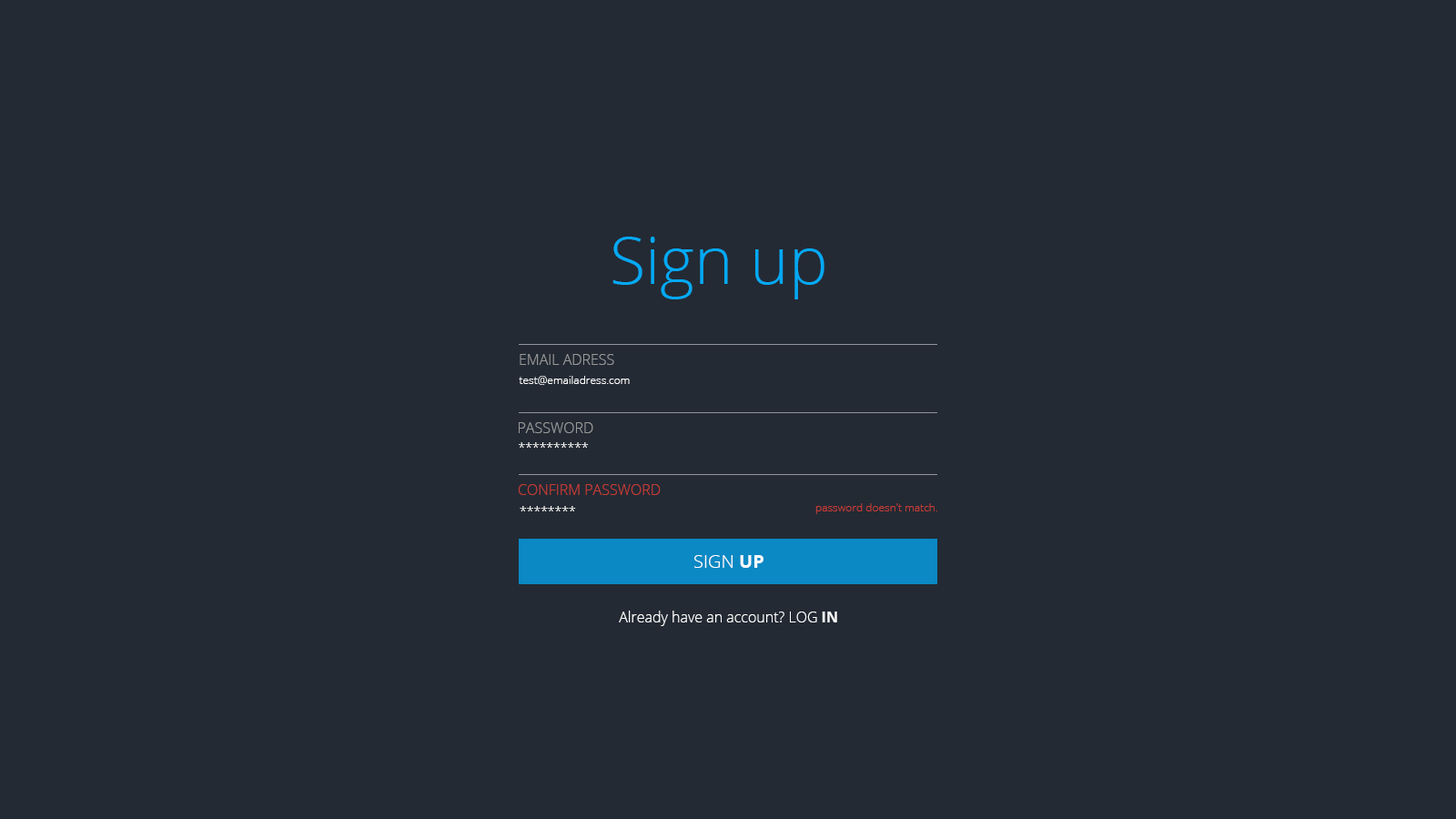
<style>
.page{position:relative;width:1456px;height:819px;background:#232a34}
.page>*{position:absolute;margin:0}
.t1{font:65.5px "OpenSans-Light";color:#03a9f4}
.t2{font:14.6px "OpenSans-Light";color:#999999}
.t3{font:10.9px "OpenSans-Light";color:#ffffff}
.t4{font:12.7px "OpenSans-Light";color:#ffffff}
.t5{font:14.6px "OpenSans-Light";color:#c63c35}
.t6{font:10.9px "OpenSans-Light";color:#c53b35}
.t7{font:18.2px "OpenSans-Light";color:#ffffff}
.t8{font:18.2px "OpenSans-Bold";color:#ffffff}
.t9{font:14.6px "OpenSans-Light";color:#ffffff}
.t10{font:14.6px "OpenSans-Bold";color:#ffffff}
</style>
<div class="page">
<p class="t1" style="left:612px;top:237px;width:212px;height:62px">Sign up</p>
<p class="t2" style="left:520px;top:354px;width:94px;height:11px">EMAIL ADRESS</p>
<p class="t3" style="left:519px;top:376px;width:111px;height:9px">test@emailadress.com</p>
<p class="t2" style="left:519px;top:422px;width:74px;height:11px">PASSWORD</p>
<p class="t4" style="left:519px;top:442px;width:70px;height:6px">**********</p>
<p class="t5" style="left:518px;top:484px;width:143px;height:11px">CONFIRM PASSWORD</p>
<p class="t4" style="left:520px;top:506px;width:56px;height:5px">********</p>
<p class="t6" style="left:815px;top:503px;width:122px;height:11px">password doesn't match.</p>
<p class="t7" style="left:694px;top:555px;width:69px;height:13px">SIGN <span class="t8">UP</span></p>
<p class="t9" style="left:619px;top:611px;width:218px;height:15px">Already have an account? LOG<span class="t10"> IN</span></p>
</div>
